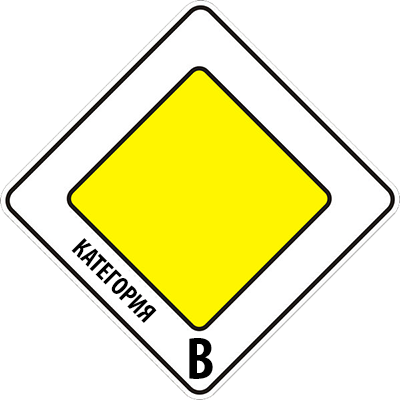
<style>
.page{position:relative;width:400px;height:400px;background:#ffffff}
.page>*{position:absolute;margin:0}
.t1{font:27px "MyriadPro-BoldCond";letter-spacing:-0.005em;color:#000000}
.t2{font:60px "MyriadPro-BoldCond";letter-spacing:-0.005em;color:#000000}
</style>
<div class="page">
<p class="t1" style="left:71px;top:238px;width:86px;height:85px;rotate:45deg">КАТЕГОРИЯ</p>
<p class="t2" style="left:189px;top:338px;width:24px;height:41px">B</p>
</div>
